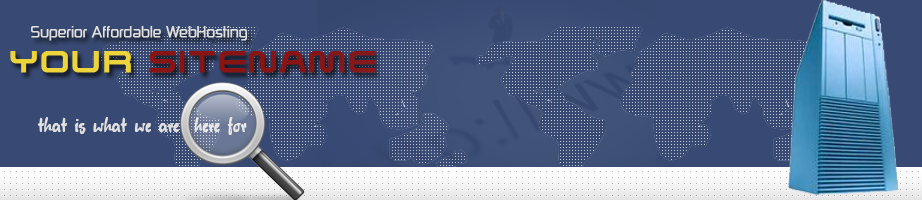
<style>
.page{position:relative;width:922px;height:200px;background:#384a73}
.page>*{position:absolute;margin:0}
.t1{font:14px "ZektonFree";letter-spacing:0.025em;color:#e0e0df;font-weight:bold}
.t2{font:36px "SavedByZero";letter-spacing:0.025em;color:#891414;font-weight:bold}
.t3{font:36px "SavedByZero";letter-spacing:0.025em;color:#edd43b;font-weight:bold}
.t4{font:14px "Juliet";letter-spacing:0.025em;color:#e0e0df;font-weight:bold}
</style>
<div class="page">
<p class="t1" style="left:31px;top:26px;width:217px;height:15px">Superior Affordable WebHosting</p>
<p class="t2" style="left:10px;top:51px;width:365px;height:22px"><span class="t3">Your </span>SITENAME</p>
<p class="t4" style="left:37px;top:117px;width:210px;height:18px">that is what we are  here for</p>
</div>
